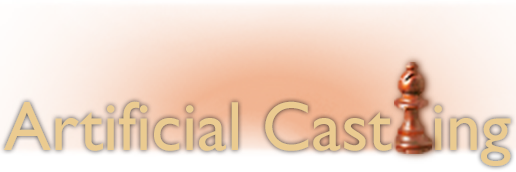
<style>
.page{position:relative;width:516px;height:172px}
.page>*{position:absolute;margin:0}
.t1{font:70px "GillSans";color:#ebcb90}
</style>
<div class="page">
<p class="t1" style="left:4px;top:101px;width:507px;height:65px">Artificial Cast  ing</p>
</div>
